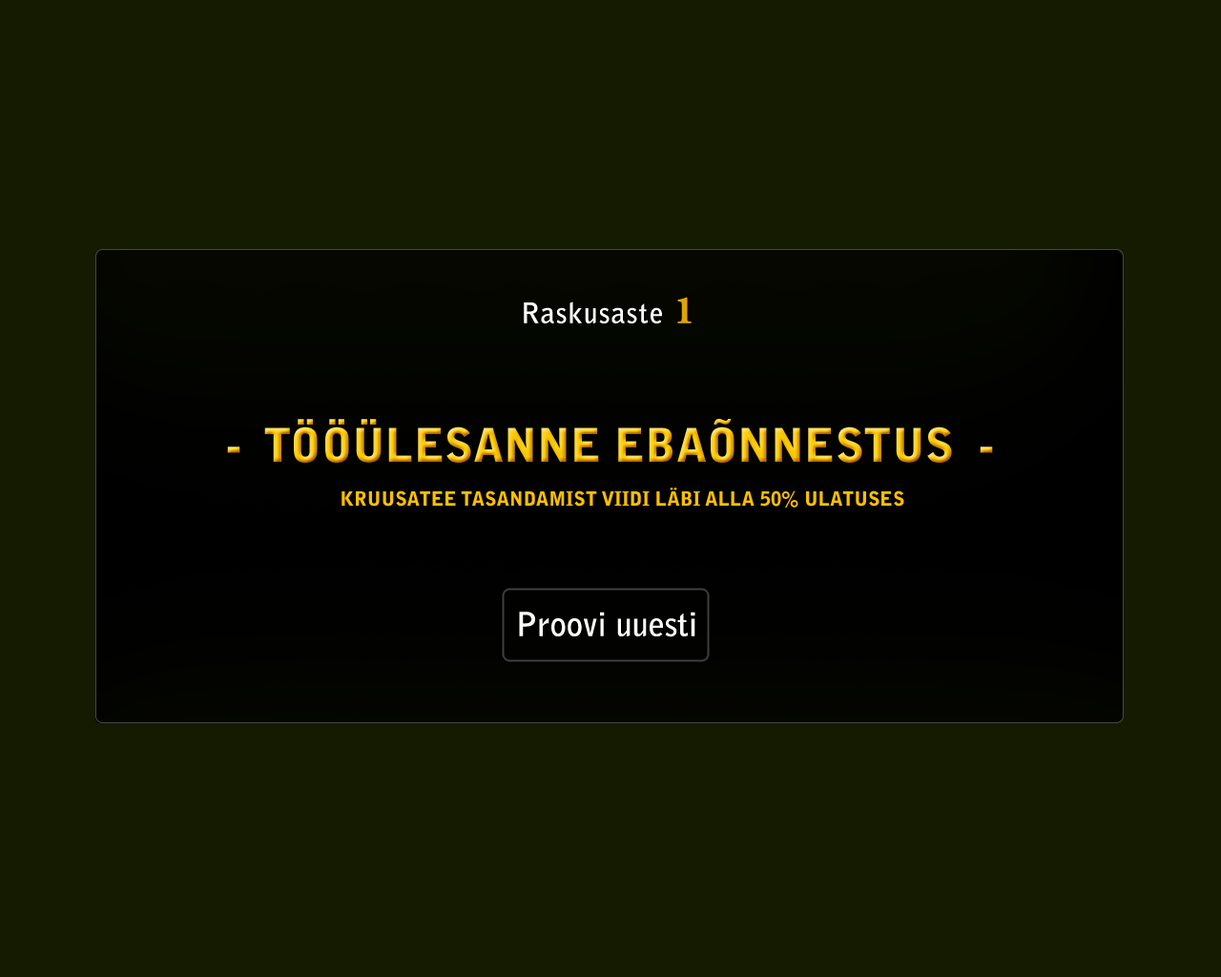
<style>
.page{position:relative;width:1221px;height:977px;background:#141b00}
.page>*{position:absolute;margin:0}
.t1{font:27.9px "BellGothicStd-Bold";letter-spacing:0.05em;color:#fefefe}
.t2{font:39.7px "AGaramondLT-Bold";letter-spacing:0.05em;color:#e0a404}
.t3{font:46.3px "BellGothicStd-Black"}
.t4{font:19.4px "BellGothicStd-Black";color:#fdbf01;text-transform:uppercase}
.t5{font:32.8px "BellGothicStd-Bold";color:#fefefe}
</style>
<div class="page">
<p class="t1" style="left:524px;top:297px;width:168px;height:26px">Raskusaste <span class="t2">1</span></p>
<p class="t3" style="left:227px;top:419px;width:766px;height:44px">-  TÖÖÜLESANNE EBAÕNNESTUS  -</p>
<p class="t4" style="left:341px;top:487px;width:563px;height:20px">KRUUSATEE TASANDAMIST VIIDI LÄBI ALLA 50% ULATUSES</p>
<p class="t5" style="left:519px;top:611px;width:176px;height:26px">Proovi uuesti</p>
</div>
